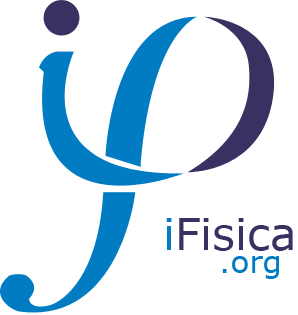
<style>
.page{position:relative;width:298px;height:315px;background:#ffffff}
.page>*{position:absolute;margin:0}
.t1{font:43.7px "Verdana";color:#393162}
.t2{font:43.7px "Verdana";color:#017cc2}
.t3{font:31.2px "Verdana";color:#017cc2}
</style>
<div class="page">
<p class="t1" style="left:166px;top:218px;width:127px;height:33px"><span class="t2">i</span>Fisica</p>
<p class="t3" style="left:222px;top:256px;width:57px;height:23px">.org</p>
</div>
